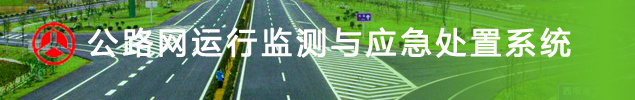
<style>
.page{position:relative;width:635px;height:100px}
.page>*{position:absolute;margin:0}
.t1{font:30px "MicrosoftYaHei";letter-spacing:0.14em;color:#fcfbf9;font-weight:bold}
</style>
<div class="page">
<p class="t1" style="left:88px;top:27px;width:483px;height:31px">公路网运行监测与应急处置系统</p>
</div>
